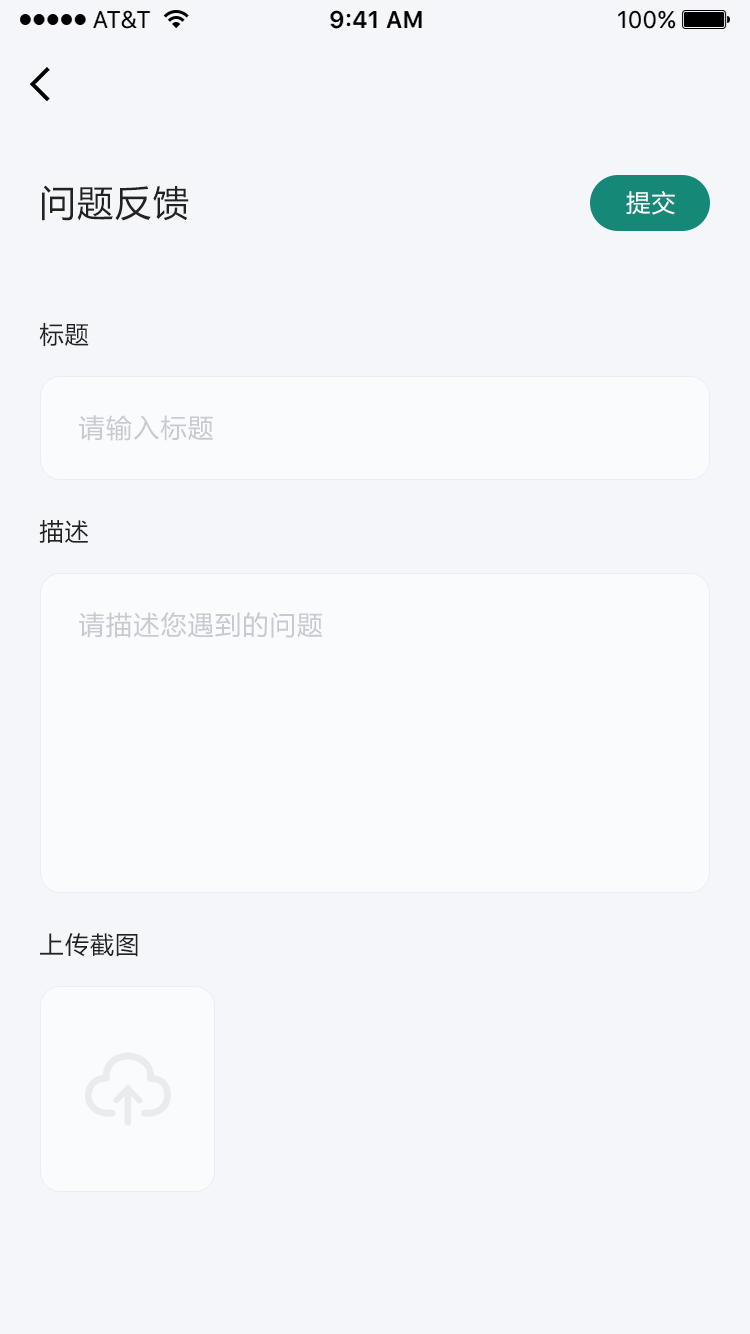
<style>
.page{position:relative;width:750px;height:1334px;background:#f5f6fa}
.page>*{position:absolute;margin:0}
.t1{font:36px "MicrosoftYaHei";letter-spacing:0.05em;color:#222222}
.t2{font:24px "MicrosoftYaHei";letter-spacing:0.05em;color:#ffffff}
.t3{font:24px "MicrosoftYaHei";letter-spacing:0.05em;color:#222222}
.t4{font:26px "MicrosoftYaHei";letter-spacing:0.05em;color:#c8cad2}
</style>
<div class="page">
<p class="t1" style="left:42px;top:185px;width:147px;height:36px">问题反馈</p>
<p class="t2" style="left:626px;top:191px;width:49px;height:24px">提交</p>
<p class="t3" style="left:39px;top:323px;width:50px;height:23px">标题</p>
<p class="t4" style="left:79px;top:415px;width:135px;height:26px">请输入标题</p>
<p class="t3" style="left:39px;top:520px;width:50px;height:23px">描述</p>
<p class="t4" style="left:79px;top:612px;width:244px;height:26px">请描述您遇到的问题</p>
<p class="t3" style="left:40px;top:933px;width:98px;height:24px">上传截图</p>
</div>
